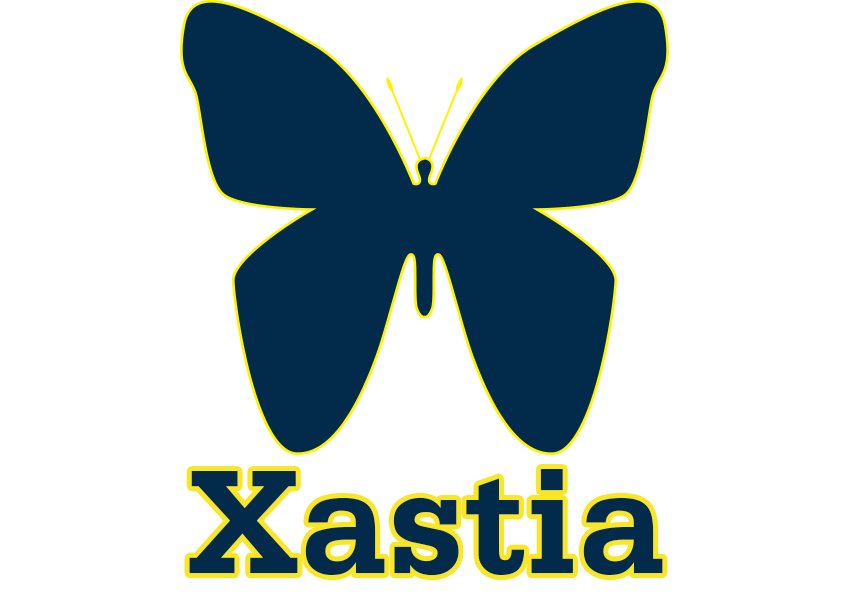
<style>
.page{position:relative;width:850px;height:600px;background:#ffffff}
.page>*{position:absolute;margin:0}
.t1{font:232.6px "DilleniaUPCBold";color:#022b4b;scale:1.18 1}
</style>
<div class="page">
<p class="t1" style="left:189px;top:469px;width:474px;height:107px">Xastia</p>
</div>
